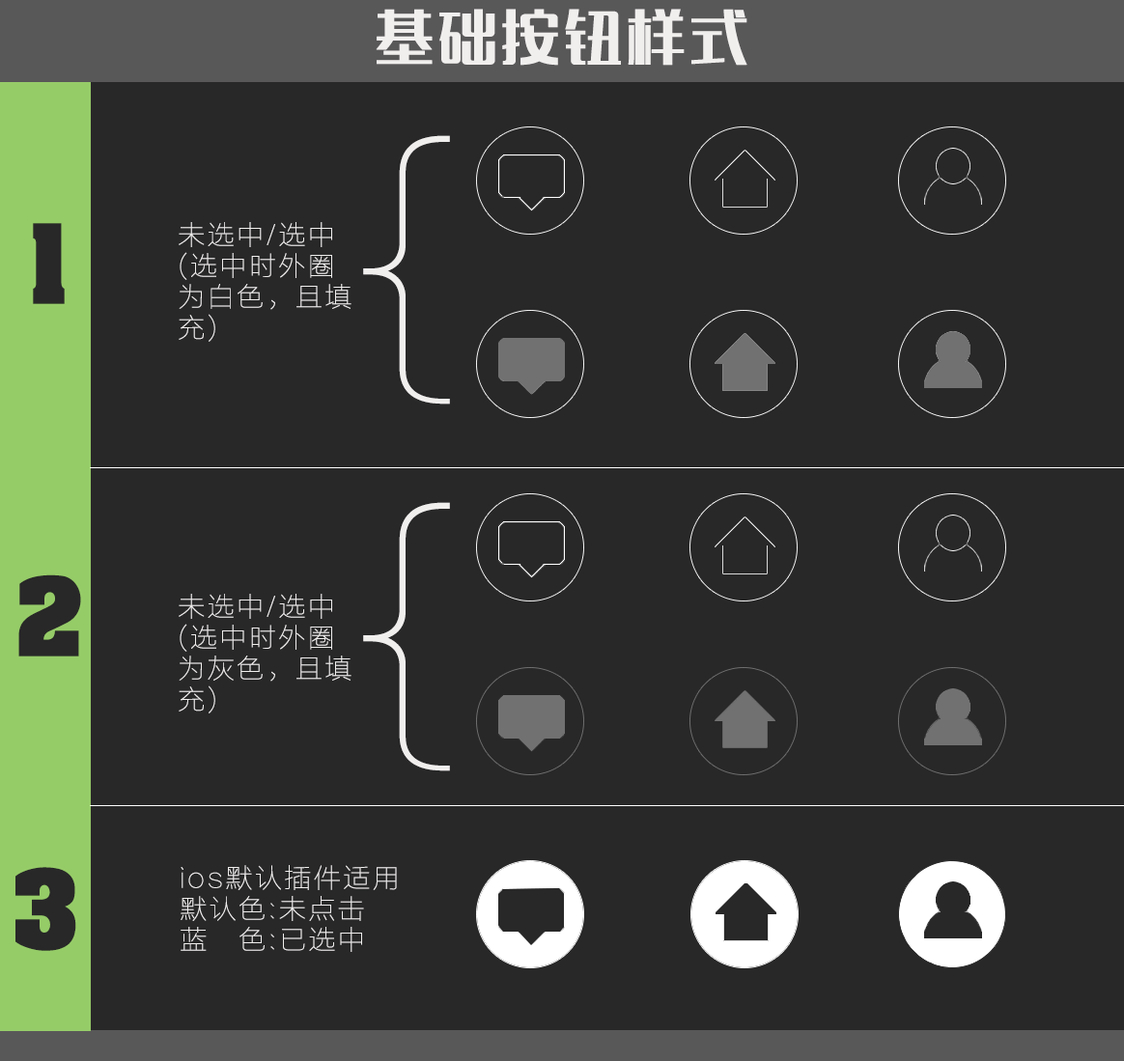
<style>
.page{position:relative;width:1124px;height:1061px;background:#282828}
.page>*{position:absolute;margin:0}
.t1{font:57.9px "MFLangQian_Noncommercial-Regular";letter-spacing:0.06em;color:#f1eeee;font-weight:bold}
.t2{font:290.1px "FZLTCXHJW--GB1-0";letter-spacing:0.06em;color:#f1eeee;font-weight:bold}
.t3{font:93.4px "AardvarkBold";letter-spacing:0.06em;color:#282828;font-weight:bold}
.t4{font:27px/30.9px "FZLTCXHJW--GB1-0";letter-spacing:0.06em;color:#f1eeee;font-weight:bold}
</style>
<div class="page">
<p class="t1" style="left:376px;top:9px;width:371px;height:57px">基础按钮样式</p>
<p class="t2" style="left:363px;top:135px;width:87px;height:270px">｛</p>
<p class="t3" style="left:33px;top:223px;width:32px;height:81px">1</p>
<p class="t4" style="left:179px;top:222px;width:172px;height:120px">未选中/选中<br>(选中时外圈为白色，且填充)</p>
<p class="t2" style="left:363px;top:502px;width:87px;height:269px">｛</p>
<p class="t3" style="left:18px;top:574px;width:63px;height:83px">2</p>
<p class="t4" style="left:179px;top:594px;width:172px;height:119px">未选中/选中<br>(选中时外圈为灰色，且填充)</p>
<p class="t3" style="left:15px;top:867px;width:61px;height:84px">3</p>
<p class="t4" style="left:181px;top:865px;width:216px;height:87px">ios默认插件适用<br>默认色:未点击<br>蓝   色:已选中</p>
</div>
